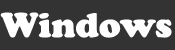
<style>
.page{position:relative;width:175px;height:50px;background:#333333}
.page>*{position:absolute;margin:0}
.t1{font:36px "CooperBlack";color:#fefefe}
</style>
<div class="page">
<p class="t1" style="left:0px;top:12px;width:172px;height:26px">Windows</p>
</div>
